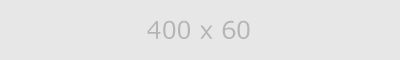
<style>
.page{position:relative;width:400px;height:60px;background:#e7e7e7}
.page>*{position:absolute;margin:0}
.t1{font:24px "Meiryo";color:#b5b5b5}
</style>
<div class="page">
<p class="t1" style="left:147px;top:20px;width:103px;height:19px">400 x 60</p>
</div>
